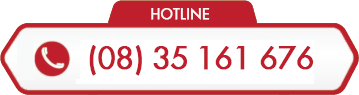
<style>
.page{position:relative;width:359px;height:95px;background:#ffffff}
.page>*{position:absolute;margin:0}
.t1{font:14px "VNF-Futura";letter-spacing:0.025em;color:#f8f9f8;font-weight:bold}
.t2{font:30px "VNF-Futura";color:#bf1e2d;font-weight:bold}
</style>
<div class="page">
<p class="t1" style="left:151px;top:8px;width:59px;height:12px">HOTLINE</p>
<p class="t2" style="left:89px;top:45px;width:225px;height:31px">(08) 35 161 676</p>
</div>
